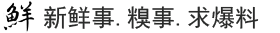
<style>
.page{position:relative;width:280px;height:33px;background:#ffffff}
.page>*{position:absolute;margin:0}
.t1{font:24px "SimHei";color:#2a2b2a}
</style>
<div class="page">
<p class="t1" style="left:44px;top:6px;width:215px;height:23px">新鲜事.糗事.求爆料</p>
</div>
